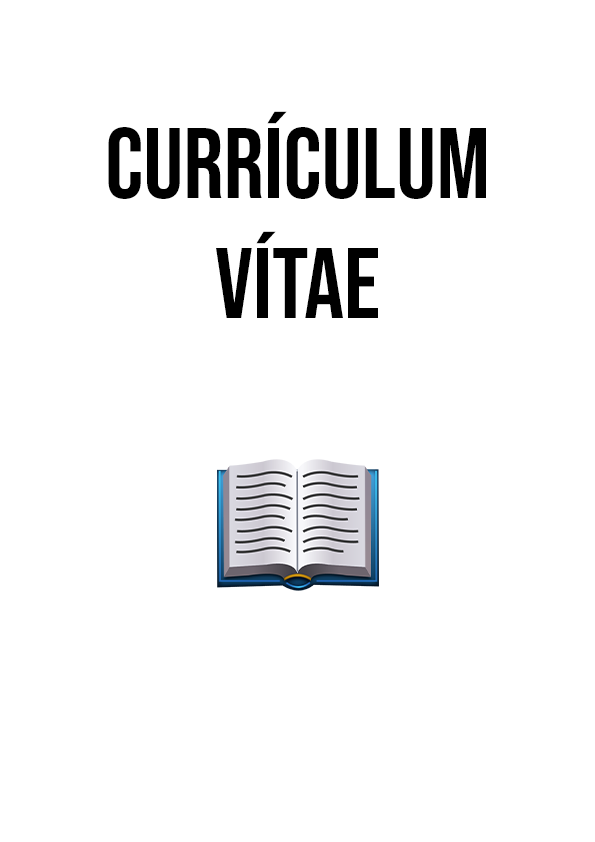
<style>
.page{position:relative;width:595px;height:842px;background:#ffffff}
.page>*{position:absolute;margin:0}
.t1{font:100px "BebasNeue-Regular";color:#000000}
</style>
<div class="page">
<p class="t1" style="left:108px;top:111px;width:378px;height:207px;text-align:center">currículum<br>vítae</p>
</div>
